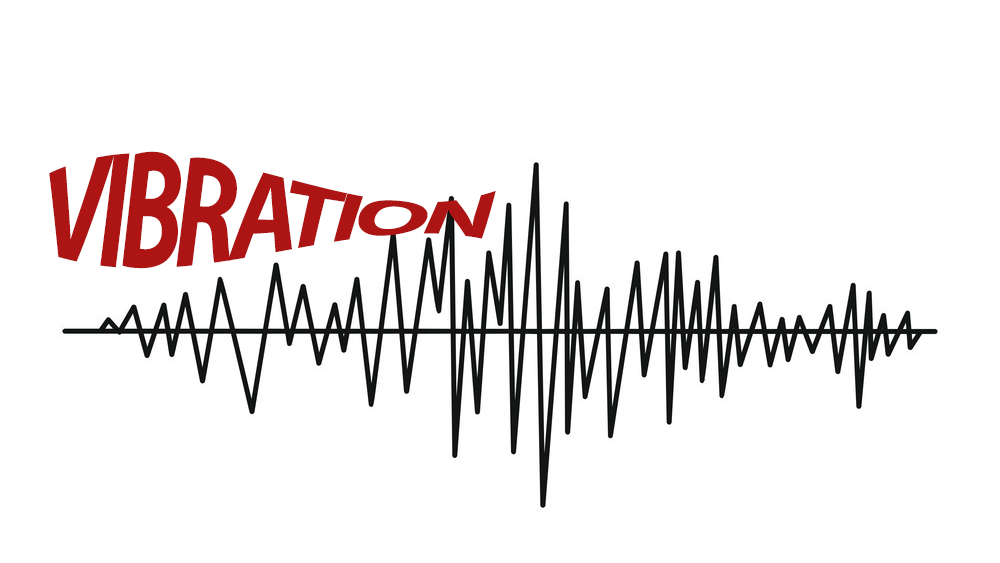
<style>
.page{position:relative;width:1000px;height:563px;background:#ffffff}
.page>*{position:absolute;margin:0}
.t1{font:108.3px "MyriadPro-BoldIt";letter-spacing:-0.075em;color:#ad1515}
</style>
<div class="page">
<p class="t1" style="left:49px;top:151px;width:447px;height:118px">VIBRATIONS</p>
</div>
